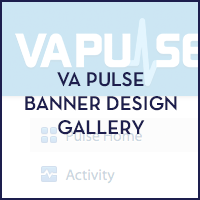
<style>
.page{position:relative;width:200px;height:200px;background:#ffffff}
.page>*{position:absolute;margin:0}
.t1{font:20px "NeutraText-DemiAlt";color:#1d1e4d}
</style>
<div class="page">
<p class="t1" style="left:25px;top:72px;width:152px;height:63px;text-align:center">VA PULSE<br>BANNER DESIGN<br>GALLERY</p>
</div>
